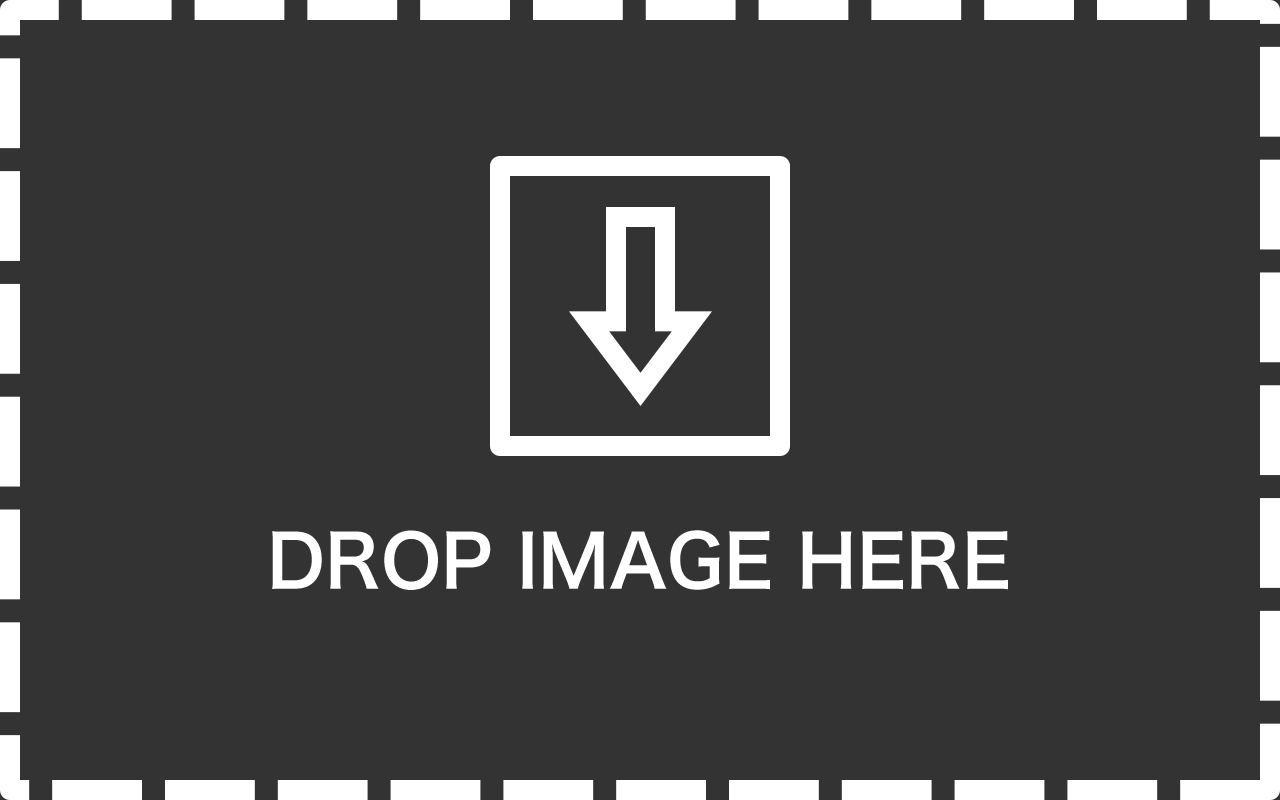
<style>
.page{position:relative;width:1280px;height:800px;background:#333333}
.page>*{position:absolute;margin:0}
.t1{font:72px "HiraginoSansGB-W6";color:#ffffff}
</style>
<div class="page">
<p class="t1" style="left:272px;top:530px;width:736px;height:60px">DROP IMAGE HERE</p>
</div>
